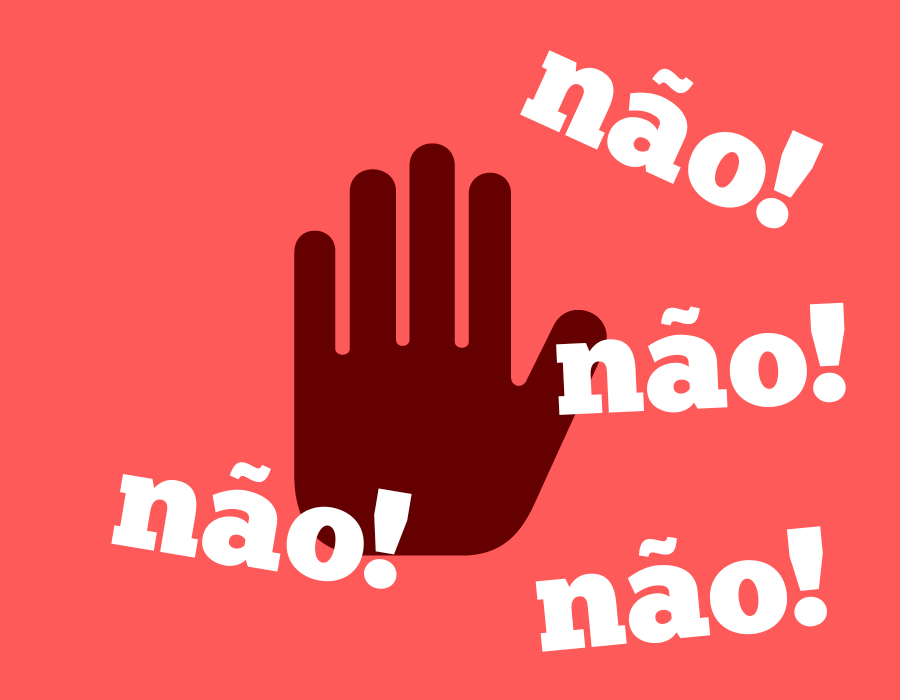
<style>
.page{position:relative;width:900px;height:700px;background:#ff5a5a}
.page>*{position:absolute;margin:0}
.t1{font:141px "ChunkFive-Roman";color:#ffffff}
.t2{font:92.7px "GothamUltra";color:#ffffff}
</style>
<div class="page">
<p class="t1" style="left:520px;top:50px;width:304px;height:179px;rotate:25deg">nao!</p>
<p class="t2" style="left:652px;top:68px;width:42px;height:26px;rotate:25deg">~</p>
<p class="t1" style="left:556px;top:302px;width:290px;height:113px;rotate:-3deg">nao!</p>
<p class="t2" style="left:661px;top:306px;width:39px;height:20px;rotate:-3deg">~</p>
<p class="t2" style="left:229px;top:462px;width:42px;height:20px;rotate:10deg">~</p>
<p class="t1" style="left:111px;top:474px;width:301px;height:115px;rotate:10deg">nao!</p>
<p class="t1" style="left:535px;top:526px;width:292px;height:126px;rotate:-5deg">nao!</p>
<p class="t2" style="left:639px;top:536px;width:38px;height:21px;rotate:-5deg">~</p>
</div>
